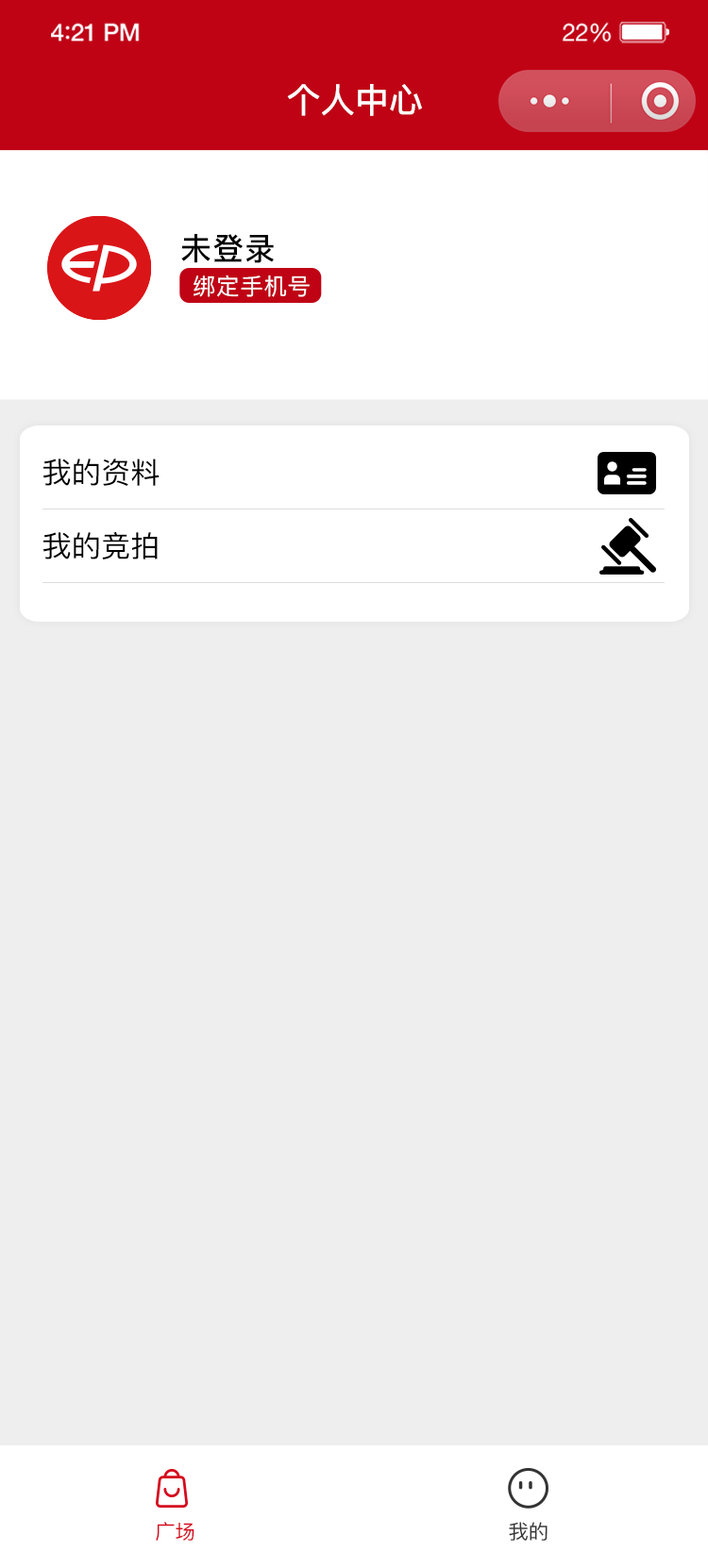
<style>
.page{position:relative;width:708px;height:1568px;background:#eeeeee}
.page>*{position:absolute;margin:0}
.t1{font:34.1px "PingFang-SC-Bold";color:#ffffff}
.t2{font:31.1px "PingFang-SC-Bold";letter-spacing:0.031em;color:#000000}
.t3{font:23px "PingFang-SC-Medium";letter-spacing:0.031em;color:#ffffff}
.t4{font:29.4px "PingFang-SC-Medium";color:#000000}
.t5{font:20.2px "PingFang-SC-Medium";color:#d5091d}
.t6{font:20.2px "PingFang-SC-Medium";color:#333333}
</style>
<div class="page">
<p class="t1" style="left:287px;top:84px;width:135px;height:32px">个人中心</p>
<p class="t2" style="left:181px;top:234px;width:93px;height:29px">未登录</p>
<p class="t3" style="left:193px;top:275px;width:116px;height:22px">绑定手机号</p>
<p class="t4" style="left:43px;top:459px;width:116px;height:27px">我的资料</p>
<p class="t4" style="left:43px;top:532px;width:115px;height:27px">我的竞拍</p>
<p class="t5" style="left:156px;top:1522px;width:38px;height:20px">广场</p>
<p class="t6" style="left:509px;top:1522px;width:38px;height:19px">我的</p>
</div>
